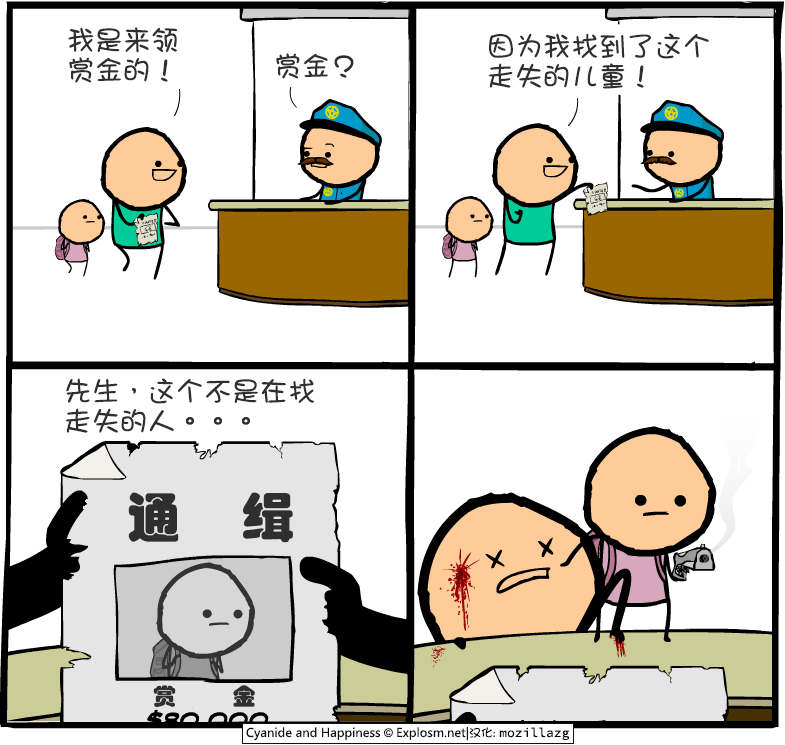
<style>
.page{position:relative;width:785px;height:745px;background:#ffffff}
.page>*{position:absolute;margin:0}
.t1{font:28px/30px "DFGirl";color:#2f2f2f}
.t2{font:28px "DFGirl";color:#2f2f2f}
.t3{font:53px "STHupo";letter-spacing:1.16em;color:#2f2f2f}
.t4{font:23px "STHupo";letter-spacing:2.46em;color:#2f2f2f}
</style>
<div class="page">
<p class="t1" style="left:68px;top:27px;width:110px;height:56px">我是来领<br>赏金的！</p>
<p class="t1" style="left:489px;top:33px;width:220px;height:56px">因为我找到了这个<br>走失的儿童！</p>
<p class="t2" style="left:276px;top:53px;width:78px;height:26px">赏金？</p>
<p class="t1" style="left:66px;top:378px;width:249px;height:55px">先生，这个不是在找<br>走失的人。。。</p>
<p class="t3" style="left:128px;top:492px;width:165px;height:51px">通缉</p>
<p class="t4" style="left:153px;top:685px;width:102px;height:22px">赏金</p>
</div>
